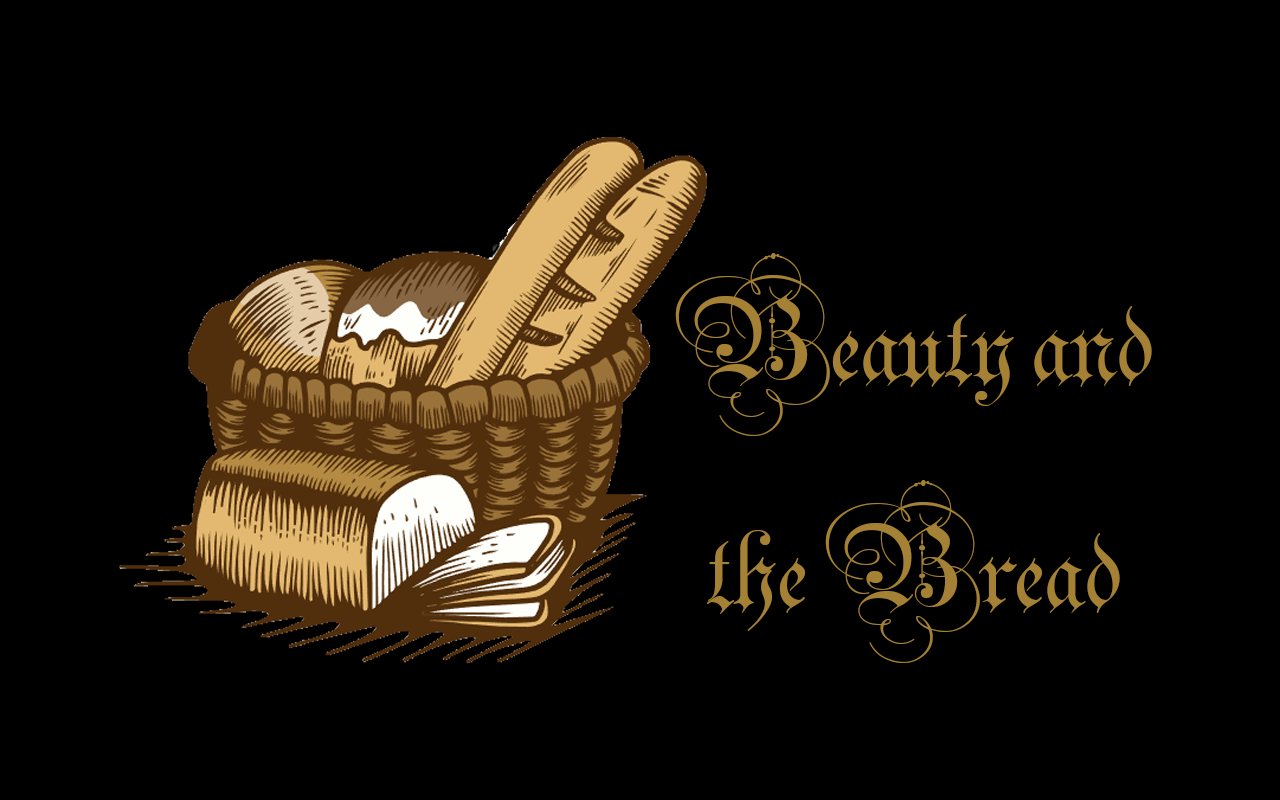
<style>
.page{position:relative;width:1280px;height:800px;background:#000000}
.page>*{position:absolute;margin:0}
.t1{font:189.3px "Parchment-Regular";color:#a48134}
</style>
<div class="page">
<p class="t1" style="left:675px;top:252px;width:477px;height:411px;text-align:center">Beauty and<br>the Bread</p>
</div>
